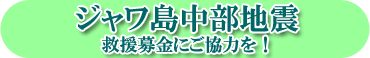
<style>
.page{position:relative;width:370px;height:58px;background:#99ff99}
.page>*{position:absolute;margin:0}
.t1{font:30px "HGPMinchoE";color:#006666}
.t2{font:18px "HGPMinchoE";color:#006666}
</style>
<div class="page">
<p class="t1" style="left:75px;top:4px;width:224px;height:29px">ジャワ島中部地震</p>
<p class="t2" style="left:101px;top:36px;width:167px;height:17px">救援募金にご協力を！</p>
</div>
